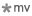
<style>
.page{position:relative;width:32px;height:16px;background:#ffffff}
.page>*{position:absolute;margin:0}
.t1{font:29.2px "ArialMT";color:#878686}
.t2{font:12.5px "ArialMT";color:#616161}
</style>
<div class="page">
<p class="t1" style="left:1px;top:3px;width:11px;height:10px">*</p>
<p class="t2" style="left:14px;top:5px;width:17px;height:7px">mv</p>
</div>
